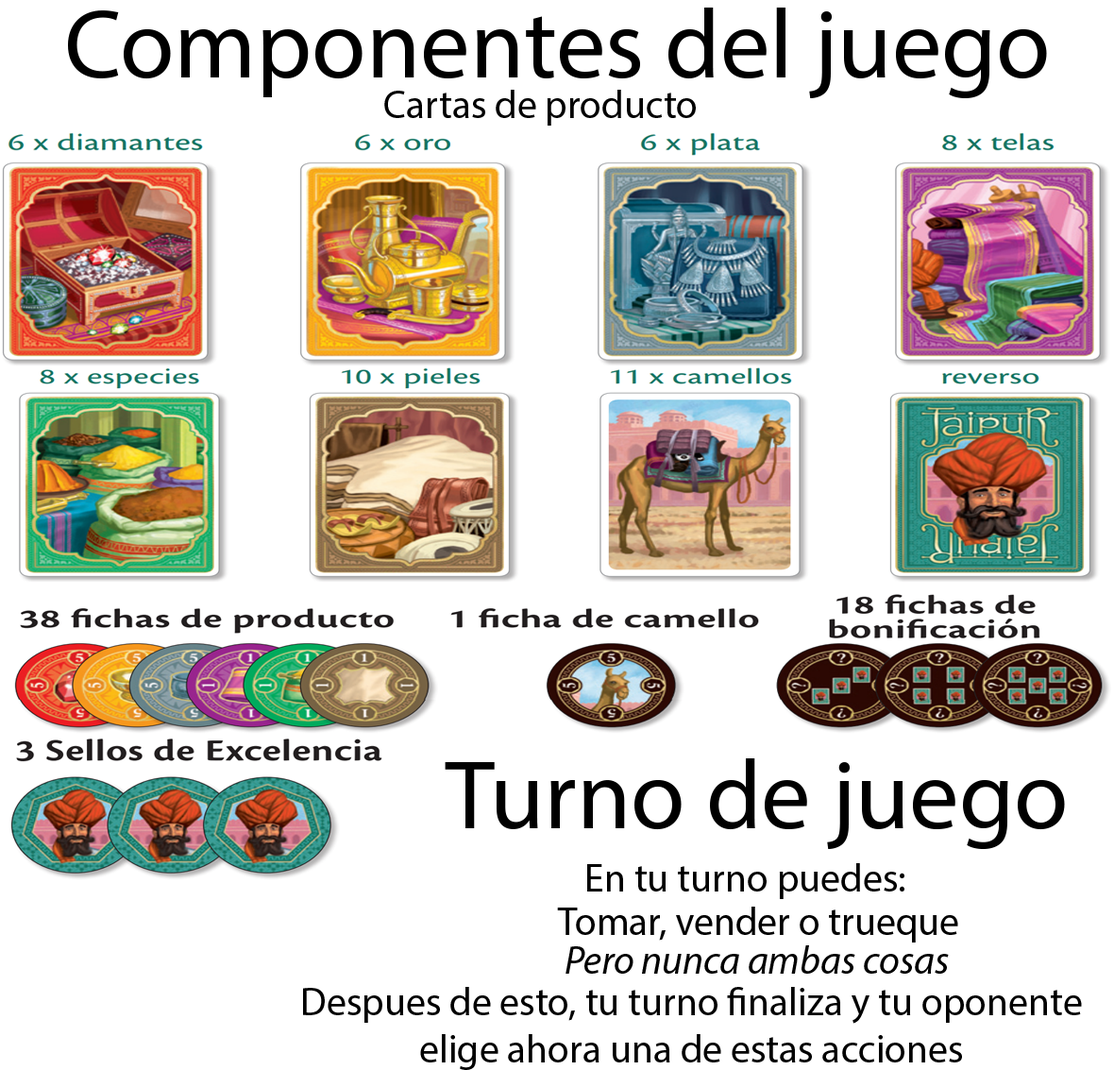
<style>
.page{position:relative;width:1114px;height:1070px;background:#ffffff}
.page>*{position:absolute;margin:0}
.t1{font:98.4px "MyriadPro-Regular";color:#000000}
.t2{font:39.4px "MyriadPro-Regular";color:#000000}
.t3{font:39.4px "MyriadPro-It";color:#000000}
</style>
<div class="page">
<p class="t1" style="left:68px;top:8px;width:979px;height:90px">Componentes del juego</p>
<p class="t2" style="left:384px;top:90px;width:312px;height:36px">Cartas de producto</p>
<p class="t1" style="left:445px;top:758px;width:620px;height:91px">Turno de juego</p>
<p class="t2" style="left:587px;top:863px;width:318px;height:36px">En tu turno puedes:</p>
<p class="t2" style="left:557px;top:907px;width:402px;height:36px">Tomar, vender o trueque</p>
<p class="t3" style="left:566px;top:945px;width:383px;height:29px">Pero nunca ambas cosas</p>
<p class="t2" style="left:303px;top:987px;width:779px;height:83px;text-align:center">Despues de esto, tu turno finaliza y tu oponente elige ahora una de estas acciones</p>
</div>
